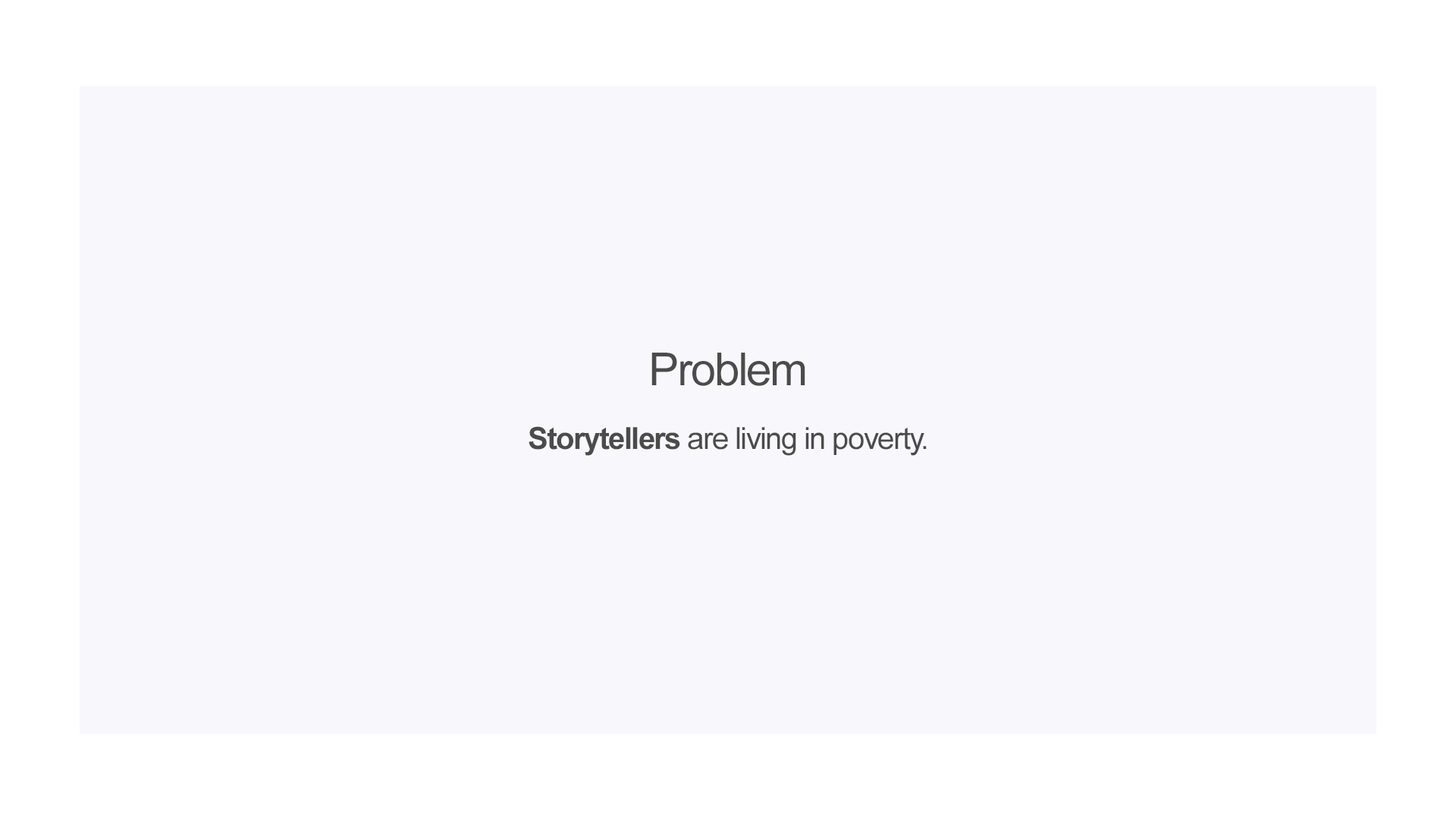
<style>
.page{position:relative;width:1456px;height:819px;background:#f8f8fc}
.page>*{position:absolute;margin:0}
.t1{font:45.5px "ArialMT";letter-spacing:-0.04em;color:#4b4b4b}
.t2{font:30.3px "ArialMT";letter-spacing:-0.04em;color:#4b4b4b}
.t3{font:30.3px "Arial-BoldMT";letter-spacing:-0.04em;color:#4b4b4b}
</style>
<div class="page">
<p class="t1" style="left:651px;top:353px;width:154px;height:33px">Problem</p>
<p class="t2" style="left:529px;top:426px;width:398px;height:30px"><span class="t3">Storytellers </span>are living in poverty.</p>
</div>
